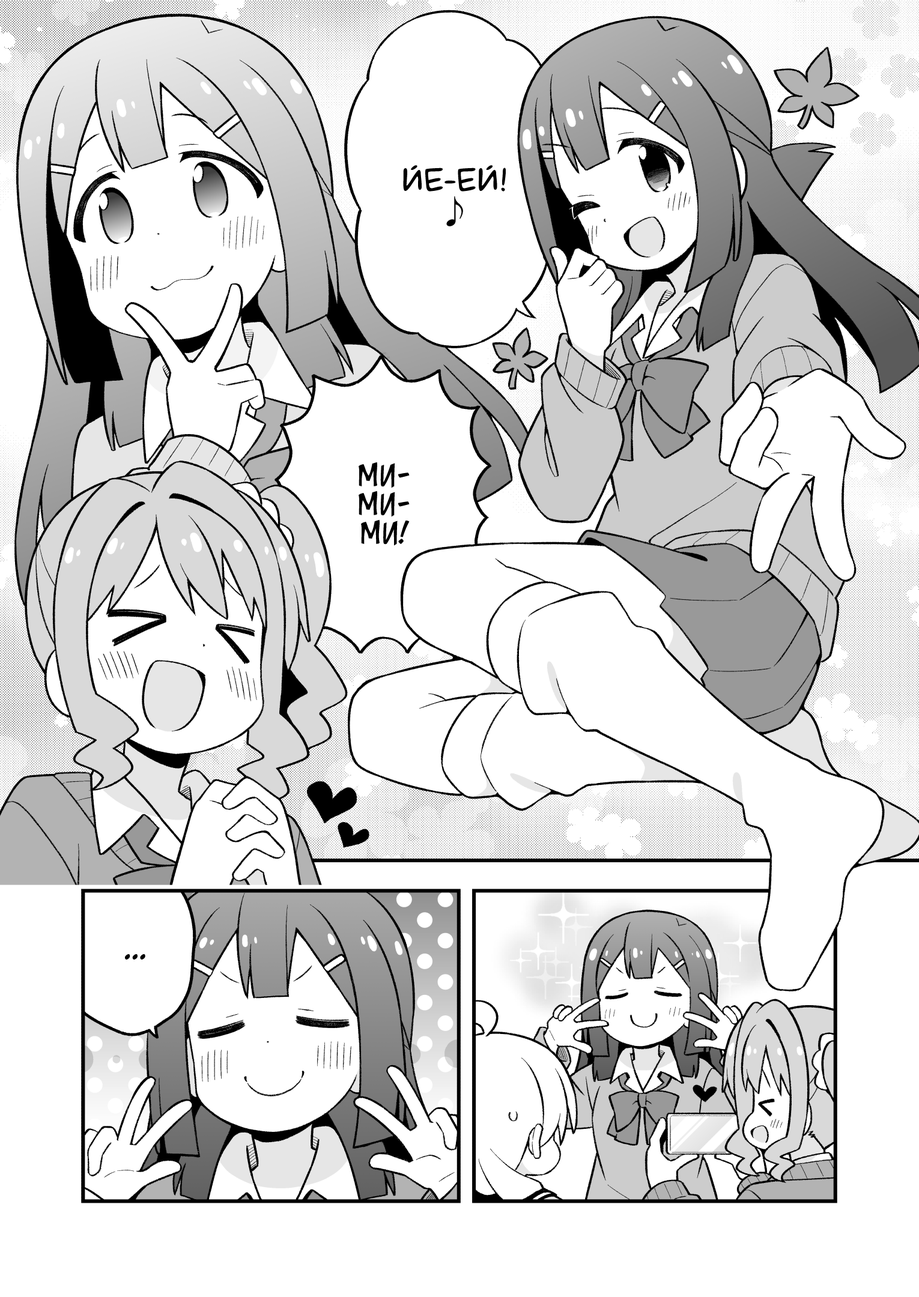
<style>
.page{position:relative;width:919px;height:1297px;background:#ffffff}
.page>*{position:absolute;margin:0}
.t1{font:32.4px "laCartoonerie";color:#000000;text-transform:uppercase}
.t2{font:32.4px "KozGoPr6N-Regular";color:#000000;text-transform:uppercase}
.t3{font:28.8px "v_CCJeffCampbell";color:#000000;text-transform:uppercase}
.t4{font:28.8px "KuraiVoice2";color:#000000;text-transform:uppercase}
</style>
<div class="page">
<p class="t1" style="left:403px;top:165px;width:103px;height:61px;text-align:center">Йе-ей!<br><span class="t2">♪</span></p>
<p class="t3" style="left:359px;top:462px;width:51px;height:84px;text-align:center">Ми-<br>ми-<br>ми!</p>
<p class="t4" style="left:125px;top:954px;width:20px;height:6px">...</p>
</div>
